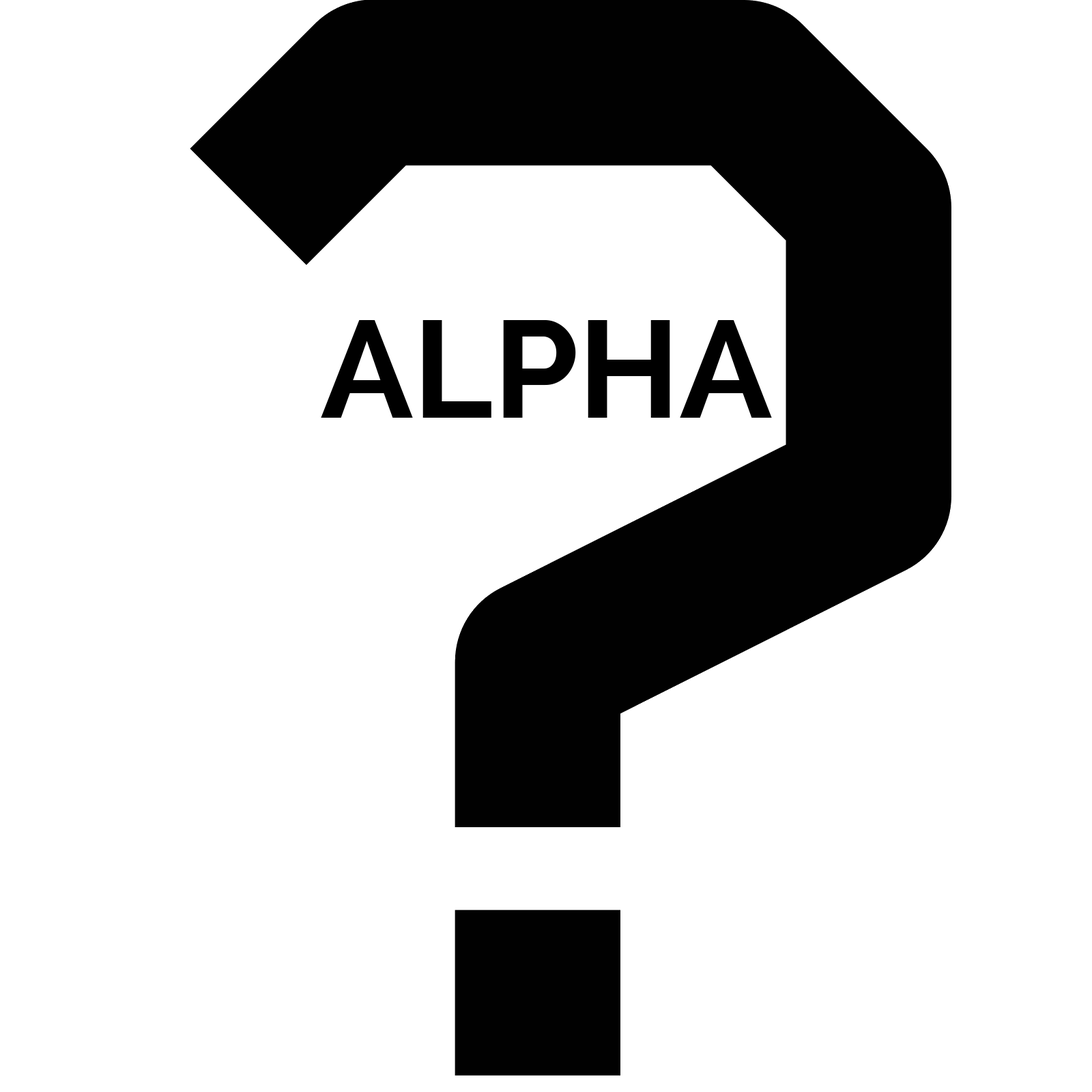
<style>
.page{position:relative;width:1092px;height:1092px;background:#ffffff}
.page>*{position:absolute;margin:0}
.t1{font:136.5px "Raleway-Bold";color:#000000}
</style>
<div class="page">
<p class="t1" style="left:321px;top:320px;width:451px;height:98px">ALPHA</p>
</div>
